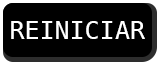
<style>
.page{position:relative;width:160px;height:65px;background:#000000}
.page>*{position:absolute;margin:0}
.t1{font:25px "Hack-Regular";color:#ffffff}
</style>
<div class="page">
<p class="t1" style="left:11px;top:21px;width:134px;height:18px">REINICIAR</p>
</div>
